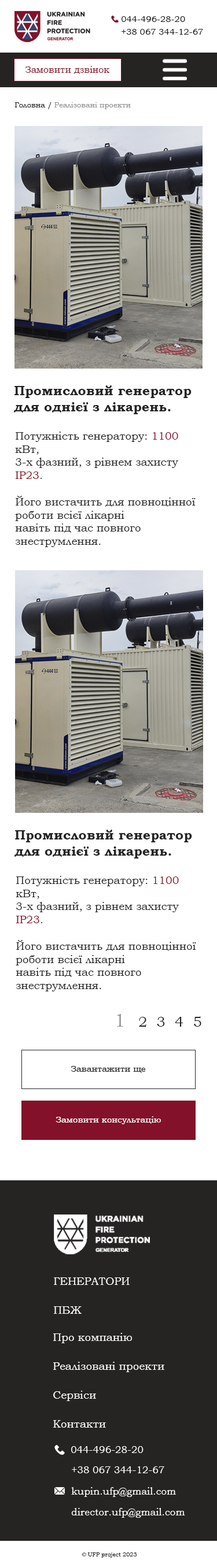
<style>
.page{position:relative;width:217px;height:1568px;background:#ffffff}
.page>*{position:absolute;margin:0}
.t1{font:8.7px/12.7px "BookmanOldStyle";color:#252423}
.t2{font:9.2px "BookmanOldStyle";color:#831129}
.t3{font:7.5px "BookmanOldStyle";color:#949494}
.t4{font:7.5px "BookmanOldStyle";color:#252423}
.t5{font:13.3px "BookmanOldStyle-Bold";color:#252423}
.t6{font:11px "BookmanOldStyle";color:#252423}
.t7{font:11px "BookmanOldStyle";color:#831129}
.t8{font:18.5px "BookmanOldStyle";color:#949494}
.t9{font:14.4px "BookmanOldStyle";color:#252423}
.t10{font:8.7px "BookmanOldStyle";color:#252423}
.t11{font:8.7px "BookmanOldStyle";color:#ffffff}
.t12{font:11px/28.9px "BookmanOldStyle";color:#fefefe;text-transform:uppercase}
.t13{font:11px/28.9px "BookmanOldStyle";color:#fefefe}
.t14{font:11px/28.9px "BookmanOldStyle";color:#ffffff}
.t15{font:9.8px "BookmanOldStyle";color:#ffffff}
.t16{font:9.8px/20.8px "BookmanOldStyle";color:#ffffff}
.t17{font:5.8px "BookmanOldStyle";color:#252423}
</style>
<div class="page">
<p class="t1" style="left:121px;top:16px;width:82px;height:19px">044-496-28-20<br>+38 067 344-12-67</p>
<p class="t2" style="left:25px;top:66px;width:85px;height:8px">Замовити дзвінок</p>
<p class="t3" style="left:14px;top:102px;width:117px;height:7px"><span class="t4">Головна / </span>Реалізовані проекти</p>
<p class="t5" style="left:13px;top:385px;width:178px;height:29px">Промисловий генератор <br>для однієї з лікарень.</p>
<p class="t6" style="left:15px;top:432px;width:180px;height:115px">Потужність генератору: <span class="t7">1100</span> кВт, <br>3-х фазний, з рівнем захисту <span class="t7">IP23</span>. <br><br>Його вистачить для повноцінної роботи всієї лікарні <br>навіть під час повного знеструмлення.</p>
<p class="t5" style="left:14px;top:830px;width:178px;height:29px">Промисловий генератор <br>для однієї з лікарень.</p>
<p class="t6" style="left:16px;top:876px;width:180px;height:115px">Потужність генератору: <span class="t7">1100</span> кВт, <br>3-х фазний, з рівнем захисту <span class="t7">IP23</span>. <br><br>Його вистачить для повноцінної роботи всієї лікарні <br>навіть під час повного знеструмлення.</p>
<p class="t8" style="left:117px;top:1014px;width:6px;height:13px">1</p>
<p class="t9" style="left:139px;top:1016px;width:62px;height:11px">2  3  4  5</p>
<p class="t10" style="left:70px;top:1066px;width:76px;height:7px">Завантажити ще</p>
<p class="t11" style="left:55px;top:1116px;width:106px;height:8px">Замовити консультацію</p>
<p class="t12" style="left:54px;top:1277px;width:75px;height:37px">Генератори<br><span class="t13">ПБЖ</span></p>
<p class="t14" style="left:53px;top:1333px;width:111px;height:95px">Про компанію<br>Реалізовані проекти<br>Сервіси<br>Контакти</p>
<p class="t15" style="left:71px;top:1446px;width:72px;height:7px">044-496-28-20</p>
<p class="t15" style="left:72px;top:1466px;width:92px;height:7px">+38 067 344-12-67</p>
<p class="t16" style="left:71px;top:1487px;width:114px;height:31px">kupin.ufp@gmail.com<br>director.ufp@gmail.com</p>
<p class="t17" style="left:81px;top:1552px;width:56px;height:6px">© UFP project 2023</p>
</div>
